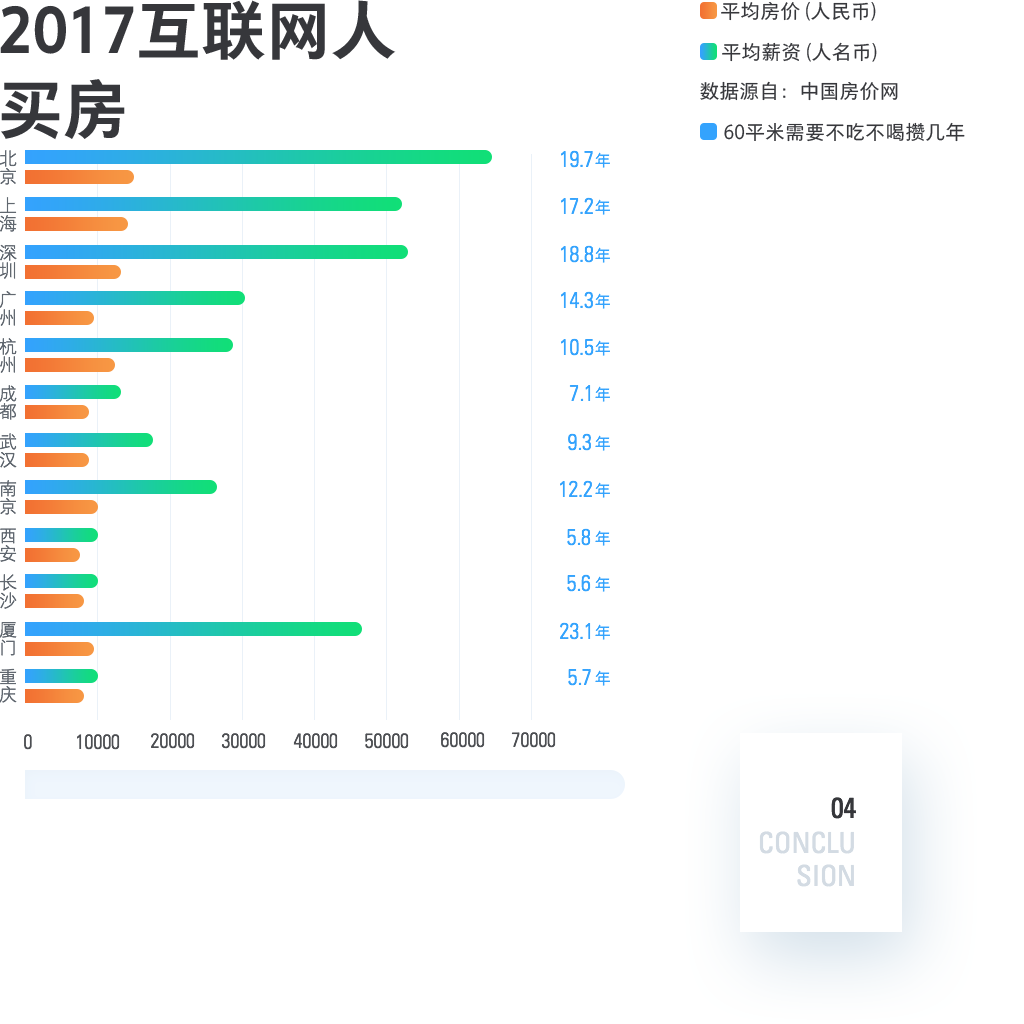
<style>
.page{position:relative;width:1024px;height:1024px;background:#ffffff}
.page>*{position:absolute;margin:0}
.t1{font:64.9px/78.9px "FZYOUH_512B--GB1-4";color:#36373b}
.t2{font:20px "FZYOUH_508R--GB1-4";color:#36373b}
.t3{font:18px/36px "FZYOUH_503L--GB1-4";color:#616870}
.t4{font:22px "UniversLTStd-LightCn";color:#34a3fd}
.t5{font:16px "FZYOUH_504L--GB1-4";color:#34a3fd}
.t6{font:20px "UniversLTStd-LightCn";color:#4d4f53}
.t7{font:28.4px "UniversLTStd-Cn";color:#36373b;text-transform:uppercase}
.t8{font:28.4px/33.6px "UniversLTStd-Cn";color:#d3dbe3;text-transform:uppercase}
</style>
<div class="page">
<p class="t1" style="left:0px;top:0px;width:396px;height:140px">2017互联网人<br>买房</p>
<p class="t2" style="left:721px;top:1px;width:155px;height:20px">平均房价 (人民币)</p>
<p class="t2" style="left:722px;top:42px;width:155px;height:20px">平均薪资 (人名币)</p>
<p class="t2" style="left:700px;top:81px;width:198px;height:20px">数据源自：中国房价网</p>
<p class="t2" style="left:724px;top:122px;width:241px;height:20px">60平米需要不吃不喝攒几年</p>
<p class="t3" style="left:0px;top:150px;width:17px;height:35px">北京</p>
<p class="t4" style="left:561px;top:150px;width:32px;height:18px">19.7</p>
<p class="t5" style="left:595px;top:152px;width:15px;height:16px">年</p>
<p class="t3" style="left:0px;top:197px;width:17px;height:35px">上海</p>
<p class="t4" style="left:561px;top:197px;width:32px;height:17px">17.2</p>
<p class="t5" style="left:595px;top:199px;width:15px;height:16px">年</p>
<p class="t3" style="left:0px;top:244px;width:17px;height:35px">深圳</p>
<p class="t4" style="left:561px;top:245px;width:33px;height:18px">18.8</p>
<p class="t5" style="left:595px;top:247px;width:15px;height:16px">年</p>
<p class="t3" style="left:0px;top:291px;width:16px;height:35px">广州</p>
<p class="t4" style="left:561px;top:291px;width:32px;height:18px">14.3</p>
<p class="t5" style="left:595px;top:293px;width:15px;height:16px">年</p>
<p class="t3" style="left:0px;top:338px;width:17px;height:35px">杭州</p>
<p class="t4" style="left:561px;top:338px;width:33px;height:18px">10.5</p>
<p class="t5" style="left:595px;top:340px;width:15px;height:16px">年</p>
<p class="t3" style="left:0px;top:385px;width:17px;height:35px">成都</p>
<p class="t4" style="left:569px;top:385px;width:22px;height:16px">7.1</p>
<p class="t5" style="left:595px;top:386px;width:15px;height:16px">年</p>
<p class="t3" style="left:0px;top:433px;width:17px;height:35px">武汉</p>
<p class="t4" style="left:568px;top:433px;width:23px;height:18px">9.3</p>
<p class="t5" style="left:595px;top:435px;width:15px;height:16px">年</p>
<p class="t3" style="left:0px;top:480px;width:17px;height:35px">南京</p>
<p class="t4" style="left:560px;top:480px;width:32px;height:17px">12.2</p>
<p class="t5" style="left:595px;top:482px;width:15px;height:16px">年</p>
<p class="t3" style="left:0px;top:528px;width:17px;height:34px">西安</p>
<p class="t4" style="left:567px;top:528px;width:24px;height:18px">5.8</p>
<p class="t5" style="left:595px;top:530px;width:15px;height:16px">年</p>
<p class="t3" style="left:0px;top:574px;width:17px;height:35px">长沙</p>
<p class="t4" style="left:567px;top:574px;width:24px;height:18px">5.6</p>
<p class="t5" style="left:595px;top:576px;width:15px;height:16px">年</p>
<p class="t3" style="left:0px;top:622px;width:17px;height:34px">厦门</p>
<p class="t4" style="left:560px;top:622px;width:31px;height:18px">23.1</p>
<p class="t5" style="left:595px;top:624px;width:15px;height:16px">年</p>
<p class="t3" style="left:0px;top:668px;width:17px;height:35px">重庆</p>
<p class="t4" style="left:568px;top:669px;width:23px;height:17px">5.7</p>
<p class="t5" style="left:595px;top:670px;width:15px;height:16px">年</p>
<p class="t6" style="left:24px;top:734px;width:8px;height:16px">0</p>
<p class="t6" style="left:77px;top:734px;width:43px;height:16px">10000</p>
<p class="t6" style="left:151px;top:733px;width:44px;height:16px">20000</p>
<p class="t6" style="left:221px;top:733px;width:45px;height:16px">30000</p>
<p class="t6" style="left:293px;top:733px;width:45px;height:16px">40000</p>
<p class="t6" style="left:365px;top:733px;width:44px;height:16px">50000</p>
<p class="t6" style="left:441px;top:732px;width:44px;height:16px">60000</p>
<p class="t6" style="left:511px;top:732px;width:45px;height:16px">70000</p>
<p class="t7" style="left:831px;top:797px;width:25px;height:22px">04</p>
<p class="t8" style="left:759px;top:831px;width:95px;height:56px;text-align:right">conclu<br>sion</p>
</div>
